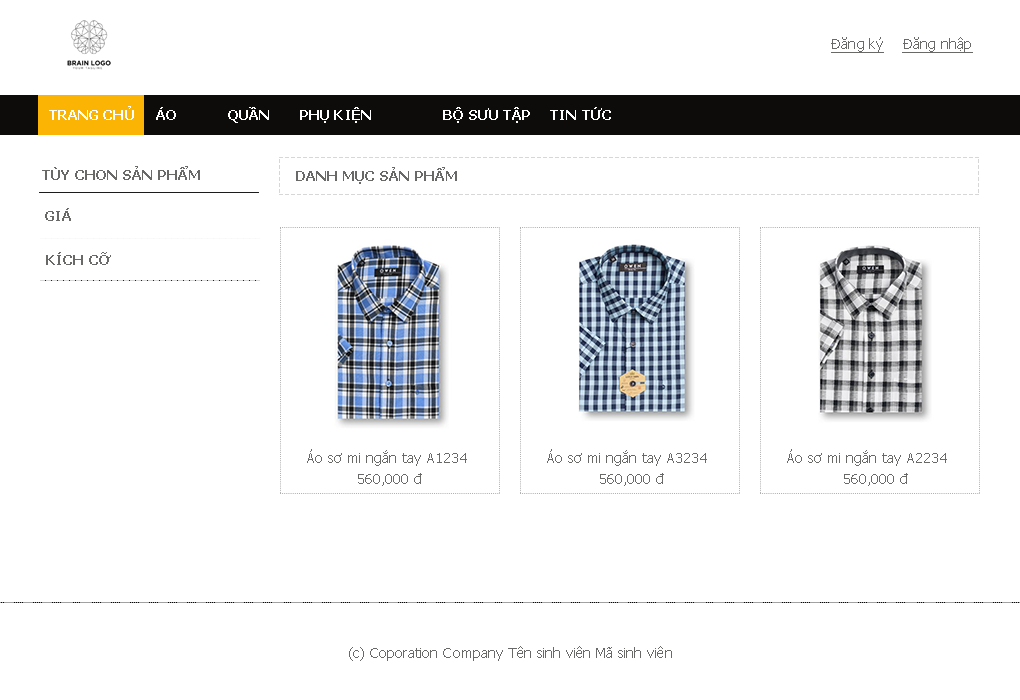
<style>
.page{position:relative;width:1020px;height:700px;background:#ffffff}
.page>*{position:absolute;margin:0}
.t1{font:14px "Tahoma";letter-spacing:0.005em;color:#696968;text-decoration:underline}
.t2{font:14px "Tahoma-Bold";letter-spacing:0.005em;color:#fefefe}
.t3{font:14px "Tahoma-Bold";letter-spacing:0.005em;color:#696968}
.t4{font:14px "Tahoma";letter-spacing:0.005em;color:#696968}
</style>
<div class="page">
<p class="t1" style="left:831px;top:37px;width:142px;height:16px">Đăng ký Đăng nhập</p>
<p class="t2" style="left:49px;top:106px;width:562px;height:17px">TRANG CHỦ ÁO  QUẦN PHỤ KIỆN  BỘ SƯU TẬP TIN TỨC</p>
<p class="t3" style="left:42px;top:166px;width:158px;height:14px">TÙY CHON SẢN PHẨM</p>
<p class="t3" style="left:296px;top:167px;width:161px;height:17px">DANH MỤC SẢN PHẨM</p>
<p class="t3" style="left:45px;top:208px;width:26px;height:13px">GIÁ</p>
<p class="t3" style="left:46px;top:252px;width:65px;height:13px">KÍCH CỠ</p>
<p class="t4" style="left:307px;top:449px;width:160px;height:17px">Áo sơ mi ngắn tay A1234</p>
<p class="t4" style="left:547px;top:449px;width:160px;height:17px">Áo sơ mi ngắn tay A3234</p>
<p class="t4" style="left:787px;top:449px;width:160px;height:17px">Áo sơ mi ngắn tay A2234</p>
<p class="t4" style="left:358px;top:473px;width:64px;height:13px">560,000 đ</p>
<p class="t4" style="left:600px;top:473px;width:64px;height:13px">560,000 đ</p>
<p class="t4" style="left:844px;top:473px;width:64px;height:13px">560,000 đ</p>
<p class="t4" style="left:349px;top:646px;width:323px;height:15px">(c) Coporation Company Tên sinh viên Mã sinh viên</p>
</div>
